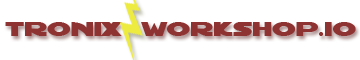
<style>
.page{position:relative;width:360px;height:60px;background:#ffffff}
.page>*{position:absolute;margin:0}
.t1{font:24px "RedFive";color:#8f3232}
</style>
<div class="page">
<p class="t1" style="left:5px;top:22px;width:351px;height:14px">Tronix  workshop.io</p>
</div>
